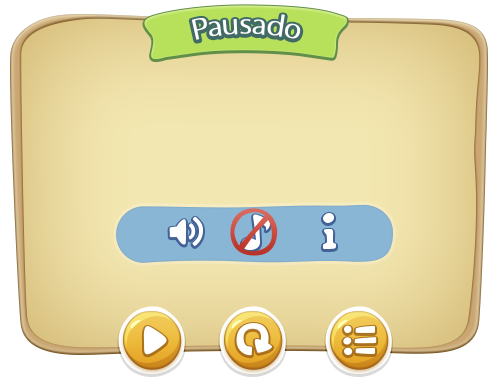
<style>
.page{position:relative;width:500px;height:386px}
.page>*{position:absolute;margin:0}
.t1{font:30px "CarterOne";letter-spacing:-0.02em;color:#ffffff}
</style>
<div class="page">
<p class="t1" style="left:191px;top:14px;width:110px;height:26px">Pausado</p>
</div>
